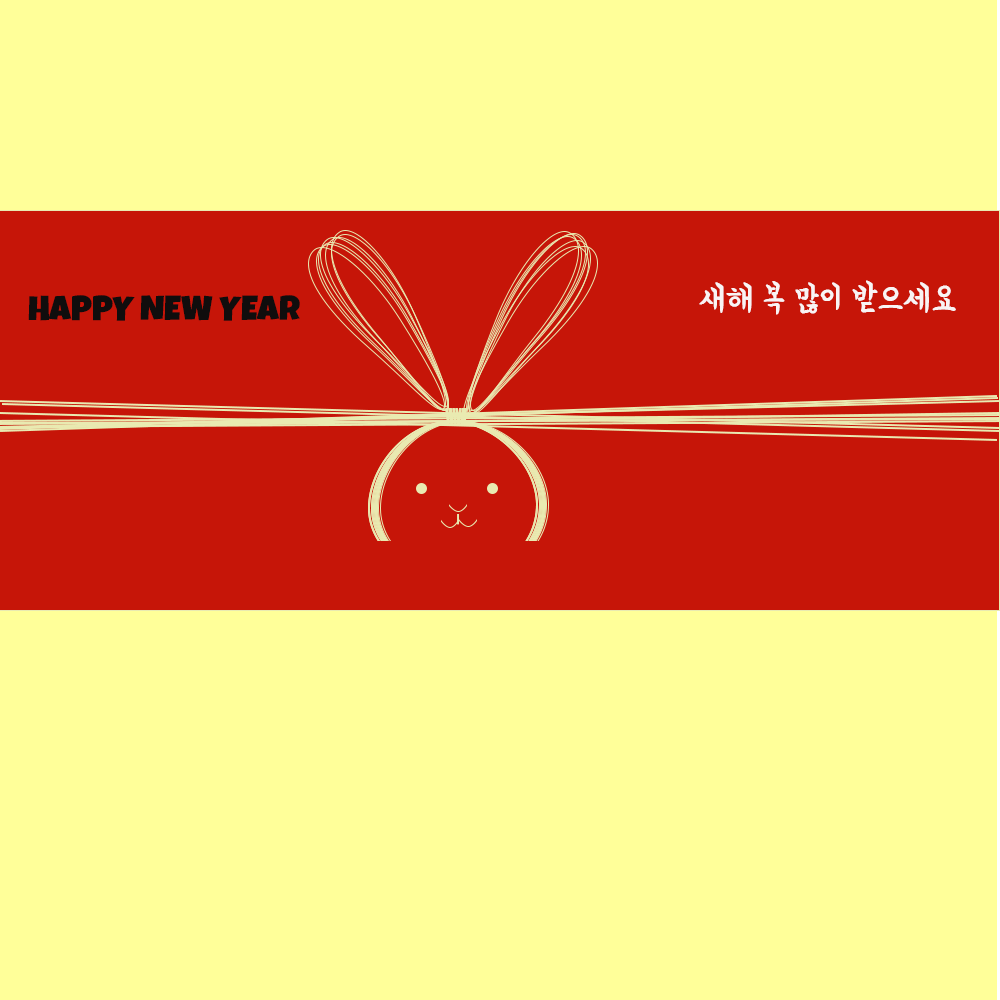
<style>
.page{position:relative;width:1000px;height:1000px;background:#ffff99}
.page>*{position:absolute;margin:0}
.t1{font:34.6px "BMYEONSUNG-OTF";color:#f9f4f4;text-transform:uppercase}
.t2{font:34.8px "LuckiestGuy-Regular";color:#100d0d;text-transform:uppercase}
</style>
<div class="page">
<p class="t1" style="left:699px;top:280px;width:257px;height:35px">새해 복 많이 받으세요</p>
<p class="t2" style="left:28px;top:295px;width:272px;height:26px">happy new year</p>
</div>
